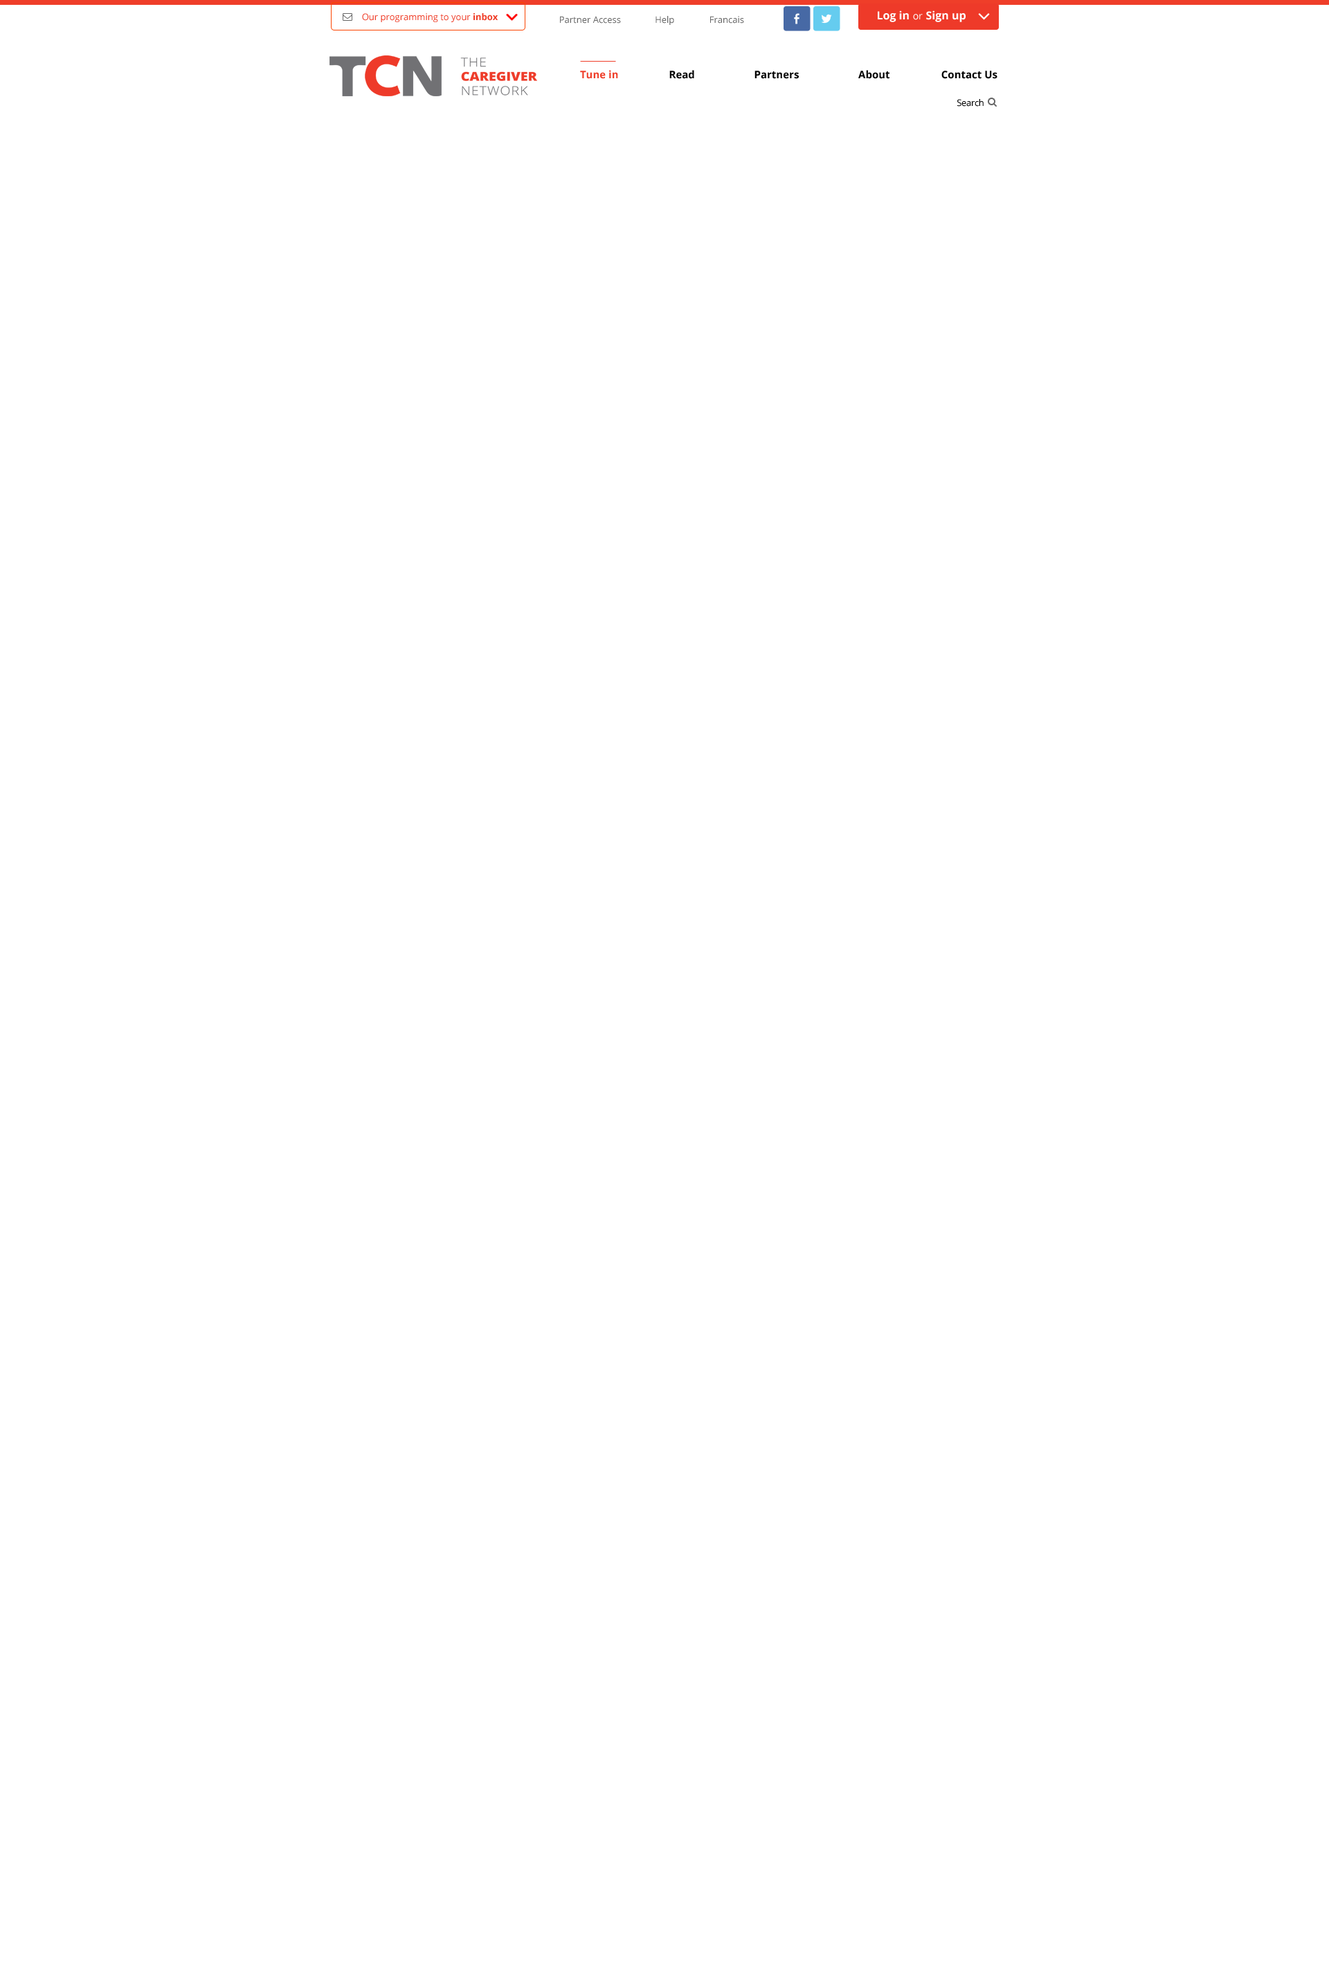
<style>
.page{position:relative;width:1329px;height:1979px;background:#ffffff}
.page>*{position:absolute;margin:0}
.t1{font:9px "OpenSans";color:#ef3e29}
.t2{font:9px "OpenSans-Bold";color:#ef3e29}
.t3{font:9px "OpenSans";color:#666666}
.t4{font:10.4px "OpenSans-Bold";color:#000000}
.t5{font:9px "OpenSans";letter-spacing:-0.025em;color:#000000}
</style>
<div class="page">
<p class="t1" style="left:362px;top:13px;width:136px;height:9px">Our programming to your<span class="t2"> inbox</span></p>
<p class="t3" style="left:560px;top:16px;width:61px;height:8px">Partner Access</p>
<p class="t3" style="left:656px;top:16px;width:18px;height:9px">Help</p>
<p class="t3" style="left:710px;top:16px;width:34px;height:8px">Francais</p>
<p class="t4" style="left:669px;top:70px;width:221px;height:9px">Read                      Partners                      About</p>
<p class="t4" style="left:942px;top:71px;width:56px;height:8px">Contact Us</p>
<p class="t5" style="left:957px;top:99px;width:27px;height:8px">Search</p>
</div>
